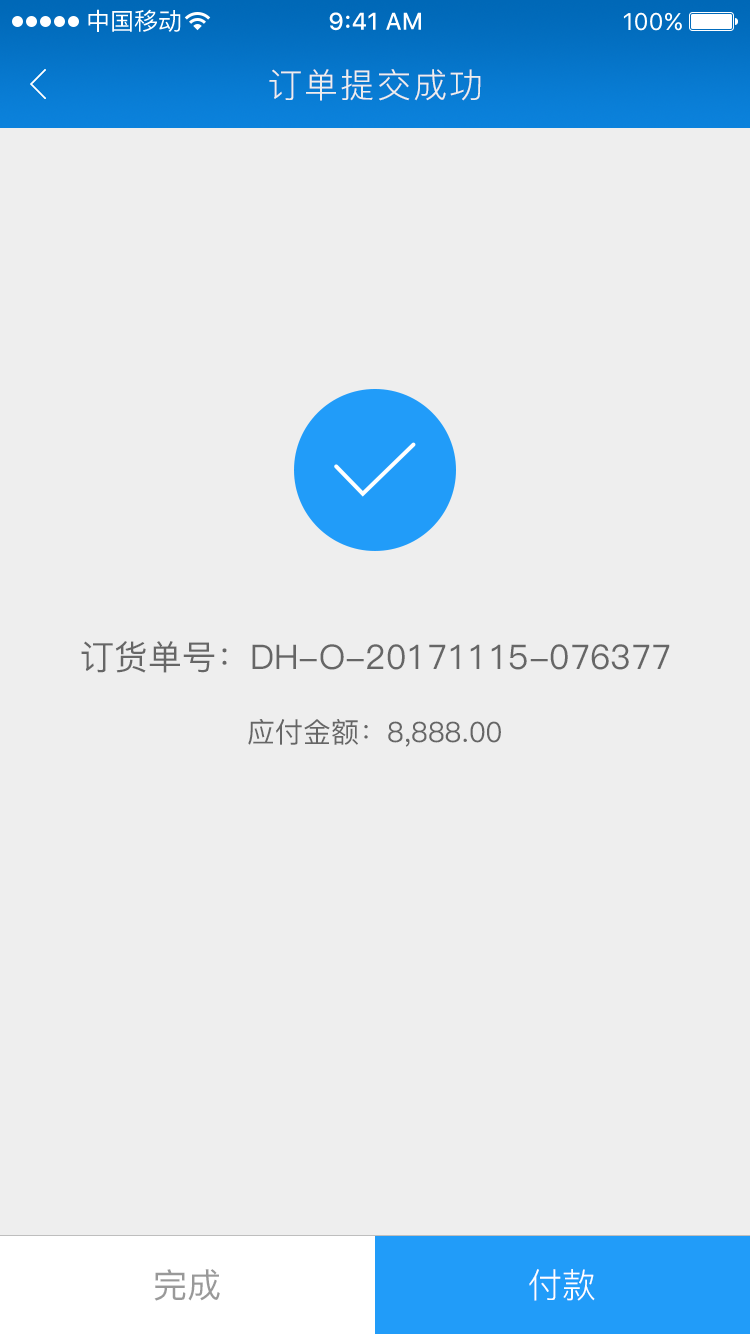
<style>
.page{position:relative;width:750px;height:1334px;background:#eeeeee}
.page>*{position:absolute;margin:0}
.t1{font:34px "PingFang-SC-Regular";letter-spacing:0.06em;color:#eeeeee}
.t2{font:34px "PingFang-SC-Medium";color:#666666}
.t3{font:28px "PingFang-SC-Medium";color:#666666}
.t4{font:34px "PingFang-SC-Medium";color:#999999}
.t5{font:34px "PingFang-SC-Regular";color:#ffffff}
</style>
<div class="page">
<p class="t1" style="left:269px;top:69px;width:212px;height:32px">订单提交成功</p>
<p class="t2" style="left:81px;top:641px;width:589px;height:32px">订货单号：DH-O-20171115-076377</p>
<p class="t3" style="left:248px;top:719px;width:253px;height:28px">应付金额：8,888.00</p>
<p class="t4" style="left:154px;top:1269px;width:66px;height:32px">完成</p>
<p class="t5" style="left:529px;top:1269px;width:66px;height:32px">付款</p>
</div>
